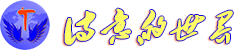
<style>
.page{position:relative;width:250px;height:50px;background:#ffffff}
.page>*{position:absolute;margin:0}
.t1{font:33.3px "²ÝÌ´Õ«Ã«Ôó¶«×ÖÌå";letter-spacing:0.025em;color:#fffd66;font-weight:bold}
</style>
<div class="page">
<p class="t1" style="left:64px;top:8px;width:169px;height:37px">诗意的世界</p>
</div>
